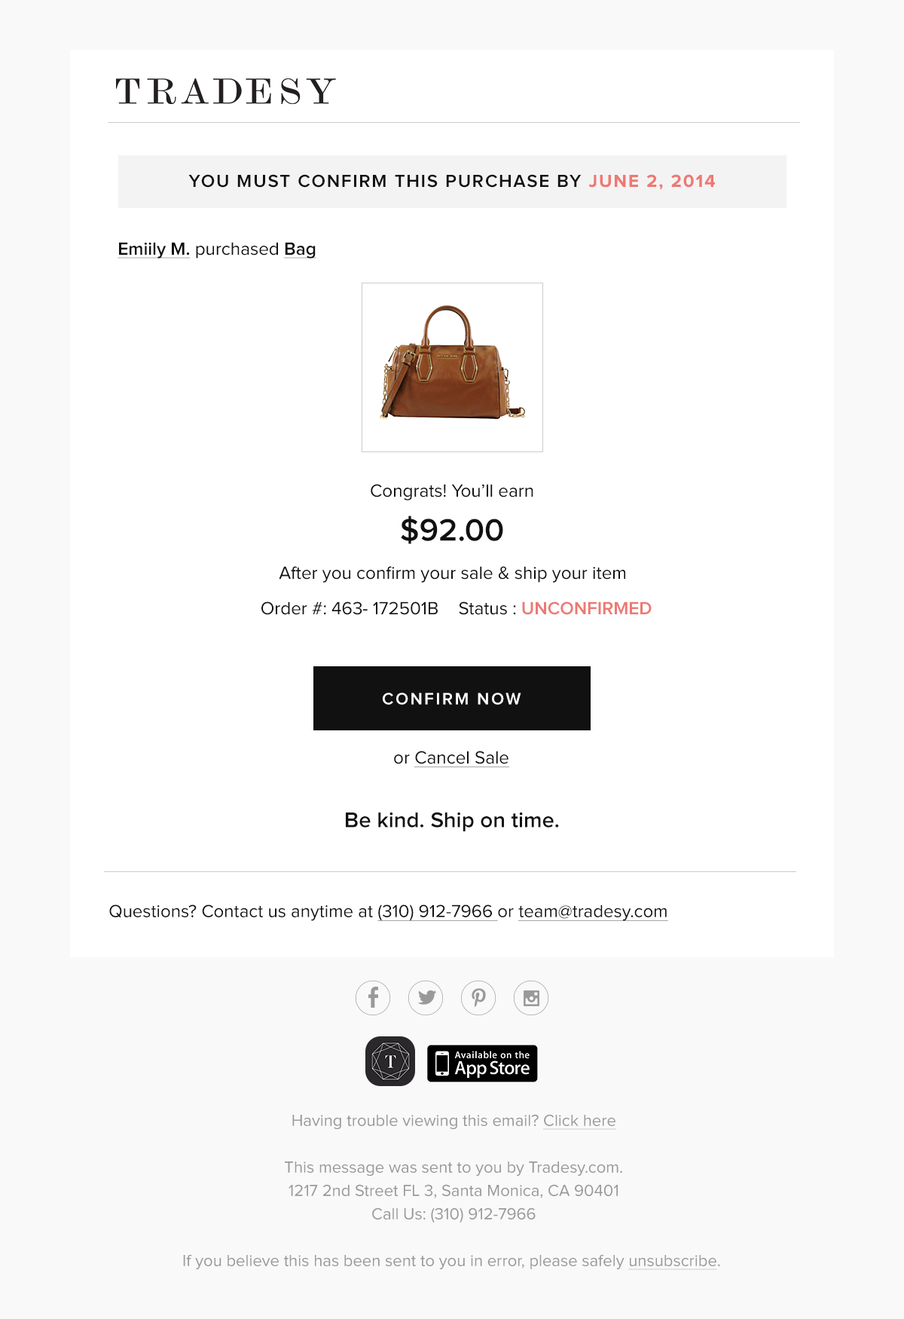
<style>
.page{position:relative;width:904px;height:1319px;background:#ffffff}
.page>*{position:absolute;margin:0}
.t1{font:18.1px "ProximaNova-Semibold";letter-spacing:0.08em;color:#111111;text-transform:uppercase}
.t2{font:18.1px "ProximaNova-Bold";letter-spacing:0.08em;color:#ee7873;text-transform:uppercase}
.t3{font:18.2px "ProximaNova-Semibold";color:#111111;text-decoration:underline}
.t4{font:18.2px "ProximaNova-Regular";color:#111111}
.t5{font:32.1px "ProximaNova-Semibold";color:#111111}
.t6{font:18.2px "ProximaNova-Semibold";color:#ee7873}
.t7{font:16.8px "ProximaNova-Semibold";letter-spacing:0.12em;color:#ffffff}
.t8{font:18.2px "ProximaNova-Regular";color:#111111;text-decoration:underline}
.t9{font:22.2px "ProximaNova-Semibold";color:#111111}
.t10{font:18.1px "ProximaNova-Regular";color:#111111}
.t11{font:18.1px "ProximaNova-Regular";color:#111111;text-decoration:underline}
.t12{font:16.6px/23.4px "ProximaNova-Regular";color:#999999}
.t13{font:16.6px/23.4px "ProximaNova-Regular";color:#999999;text-decoration:underline}
</style>
<div class="page">
<p class="t1" style="left:188px;top:174px;width:527px;height:16px">You must confirm this purchase by <span class="t2">June 2, 2014</span></p>
<p class="t3" style="left:118px;top:242px;width:198px;height:16px">Emiily M. <span class="t4">purchased </span>Bag</p>
<p class="t4" style="left:371px;top:484px;width:163px;height:16px">Congrats! You’ll earn</p>
<p class="t5" style="left:401px;top:515px;width:102px;height:29px">$92.00</p>
<p class="t4" style="left:279px;top:566px;width:346px;height:16px">After you confirm your sale &amp; ship your item</p>
<p class="t4" style="left:261px;top:601px;width:177px;height:14px">Order #: 463- 172501B</p>
<p class="t6" style="left:459px;top:601px;width:193px;height:14px"><span class="t4">Status : </span>UNCONFIRMED</p>
<p class="t7" style="left:383px;top:693px;width:138px;height:12px">CONFIRM NOW</p>
<p class="t8" style="left:394px;top:751px;width:115px;height:16px"><span class="t4">or </span>Cancel Sale</p>
<p class="t9" style="left:346px;top:812px;width:213px;height:19px">Be kind. Ship on time.</p>
<p class="t10" style="left:109px;top:904px;width:559px;height:17px">Questions? Contact us anytime at <span class="t11">(310) 912-7966 </span>or <span class="t11">team@tradesy.com</span></p>
<p class="t12" style="left:183px;top:1114px;width:537px;height:156px;text-align:center">Having trouble viewing this email? <span class="t13">Click here<br></span><br>This message was sent to you by Tradesy.com.<br>1217 2nd Street FL 3, Santa Monica, CA 90401<br>Call Us: (310) 912-7966<br><br>If you believe this has been sent to you in error, please safely <span class="t13">unsubscribe</span>.</p>
</div>
